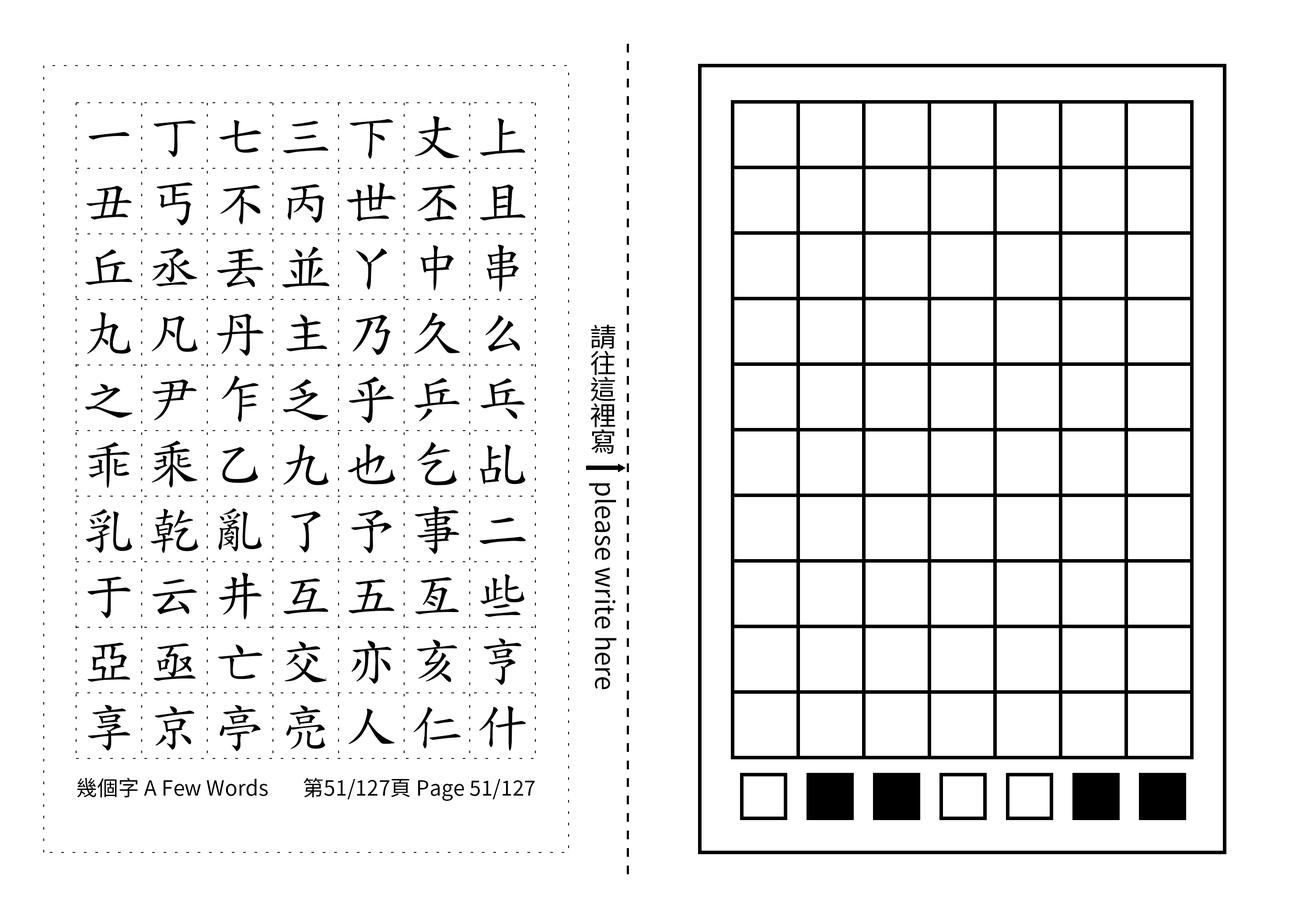
<style>
.page{position:relative;width:1299px;height:918px;background:#ffffff}
.page>*{position:absolute;margin:0}
.t1{font:52.5px/65.6px "TW-Kai-98_1";letter-spacing:0.25em;color:#000000}
.t2{font:26.2px "SourceHanSansTC-Regular";color:#000000}
.t3{font:21px "SourceHanSansTC-Regular";color:#000000}
</style>
<div class="page">
<p class="t1" style="left:85px;top:116px;width:441px;height:636px;text-align:center">一丁七三下丈上丑丐不丙世丕且丘丞丟並丫中串丸凡丹主乃久么之尹乍乏乎乒乓乖乘乙九也乞乩乳乾亂了予事二于云井互五亙些亞亟亡交亦亥亨享京亭亮人仁什</p>
<p class="t2" style="left:589px;top:324px;width:28px;height:366px;text-align:center">請往這裡寫　please write here</p>
<p class="t3" style="left:77px;top:778px;width:191px;height:20px">幾個字 A Few Words</p>
<p class="t3" style="left:303px;top:778px;width:232px;height:23px">第51/127頁 Page 51/127</p>
</div>
